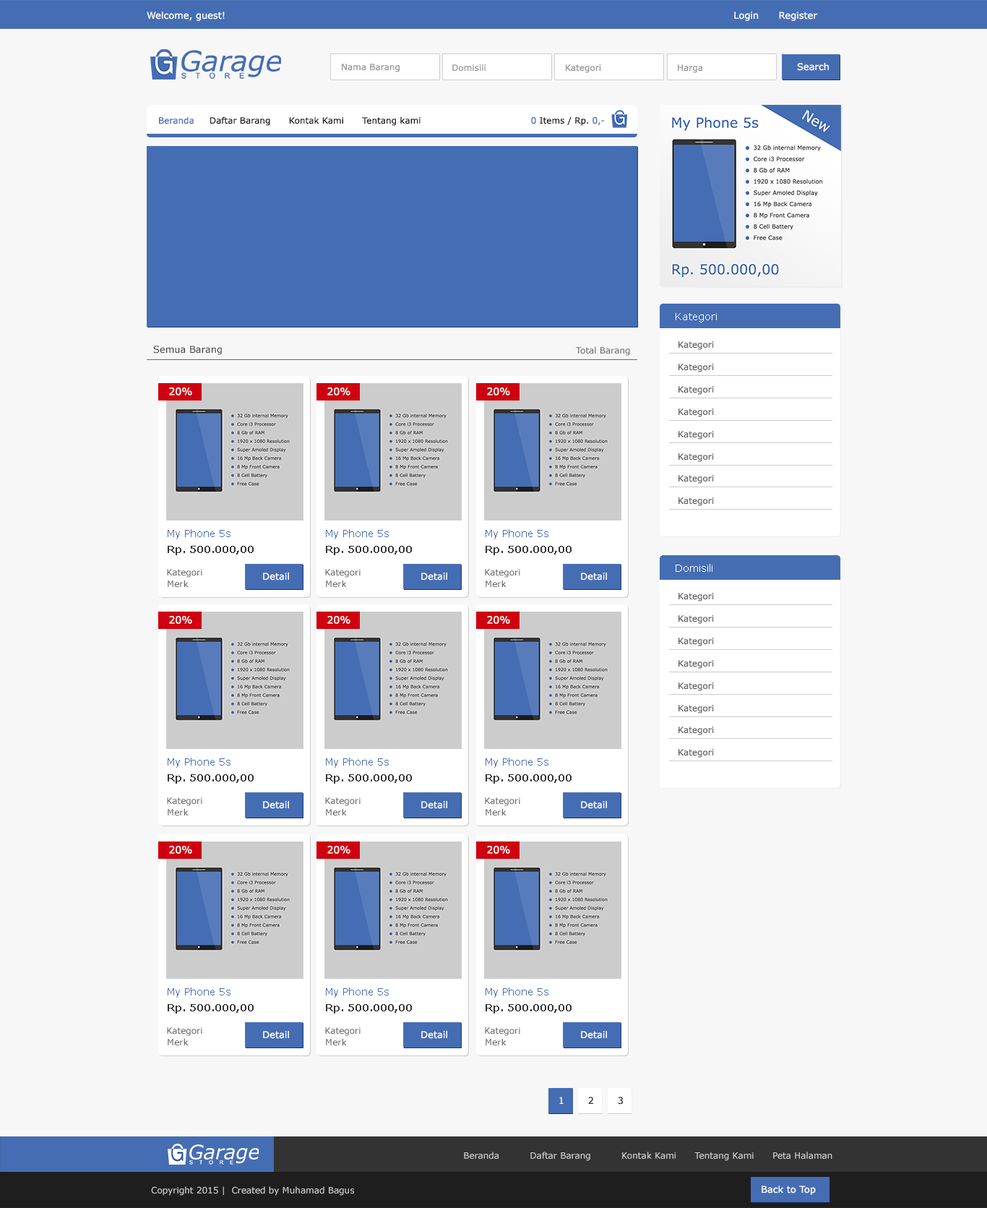
<style>
.page{position:relative;width:987px;height:1208px;background:#f7f7f7}
.page>*{position:absolute;margin:0}
.t1{font:9.4px "Verdana";color:#ffffff}
.t2{font:8.7px "Verdana";color:#999999}
.t3{font:8.7px "Verdana";color:#1e1e1e}
.t4{font:8.7px "Verdana";color:#456db3}
.t5{font:10.1px "Verdana";color:#ffffff}
.t6{font:8.7px "Verdana";color:#666666}
.t7{font:9.4px "Verdana";color:#333333}
.t8{font:10.1px "Verdana";color:#456db3}
.t9{font:10.1px "Verdana-Bold";color:#333333}
.t10{font:8.7px "Verdana";color:#cccccc}
</style>
<div class="page">
<p class="t1" style="left:147px;top:12px;width:78px;height:9px">Welcome, guest!</p>
<p class="t1" style="left:734px;top:12px;width:84px;height:9px">Login      Register</p>
<p class="t2" style="left:342px;top:64px;width:58px;height:8px">Nama Barang</p>
<p class="t2" style="left:452px;top:64px;width:34px;height:8px">Domisili</p>
<p class="t2" style="left:566px;top:64px;width:35px;height:9px">Kategori</p>
<p class="t2" style="left:678px;top:64px;width:25px;height:9px">Harga</p>
<p class="t1" style="left:797px;top:63px;width:32px;height:8px">Search</p>
<p class="t3" style="left:159px;top:116px;width:262px;height:10px"><span class="t4">Beranda    </span> Daftar Barang      Kontak Kami      Tentang kami</p>
<p class="t3" style="left:531px;top:116px;width:74px;height:10px"><span class="t4">0 </span>Items / Rp.<span class="t4"> 0,-</span></p>
<p class="t5" style="left:676px;top:313px;width:41px;height:9px">Kategori</p>
<p class="t6" style="left:679px;top:341px;width:35px;height:9px">Kategori</p>
<p class="t7" style="left:153px;top:345px;width:69px;height:10px">Semua Barang</p>
<p class="t6" style="left:576px;top:346px;width:54px;height:10px">Total Barang</p>
<p class="t6" style="left:679px;top:364px;width:35px;height:8px">Kategori</p>
<p class="t5" style="left:169px;top:387px;width:23px;height:8px">20%</p>
<p class="t5" style="left:327px;top:387px;width:24px;height:8px">20%</p>
<p class="t5" style="left:487px;top:387px;width:23px;height:8px">20%</p>
<p class="t6" style="left:679px;top:386px;width:35px;height:9px">Kategori</p>
<p class="t6" style="left:679px;top:408px;width:35px;height:9px">Kategori</p>
<p class="t6" style="left:679px;top:431px;width:35px;height:8px">Kategori</p>
<p class="t6" style="left:679px;top:453px;width:35px;height:9px">Kategori</p>
<p class="t6" style="left:679px;top:475px;width:35px;height:9px">Kategori</p>
<p class="t6" style="left:679px;top:497px;width:35px;height:9px">Kategori</p>
<p class="t8" style="left:168px;top:529px;width:63px;height:10px">My Phone 5s</p>
<p class="t8" style="left:326px;top:529px;width:63px;height:10px">My Phone 5s</p>
<p class="t8" style="left:486px;top:529px;width:63px;height:10px">My Phone 5s</p>
<p class="t9" style="left:168px;top:546px;width:86px;height:9px">Rp. 500.000,00</p>
<p class="t9" style="left:326px;top:546px;width:86px;height:9px">Rp. 500.000,00</p>
<p class="t9" style="left:486px;top:546px;width:86px;height:9px">Rp. 500.000,00</p>
<p class="t6" style="left:167px;top:569px;width:35px;height:8px">Kategori</p>
<p class="t6" style="left:325px;top:569px;width:36px;height:8px">Kategori</p>
<p class="t6" style="left:485px;top:569px;width:35px;height:8px">Kategori</p>
<p class="t5" style="left:676px;top:564px;width:37px;height:8px">Domisili</p>
<p class="t6" style="left:168px;top:580px;width:21px;height:8px">Merk</p>
<p class="t1" style="left:263px;top:572px;width:26px;height:8px">Detail</p>
<p class="t6" style="left:326px;top:580px;width:21px;height:8px">Merk</p>
<p class="t1" style="left:421px;top:572px;width:26px;height:8px">Detail</p>
<p class="t6" style="left:486px;top:580px;width:21px;height:8px">Merk</p>
<p class="t1" style="left:581px;top:572px;width:26px;height:8px">Detail</p>
<p class="t6" style="left:679px;top:593px;width:35px;height:8px">Kategori</p>
<p class="t5" style="left:169px;top:616px;width:23px;height:8px">20%</p>
<p class="t5" style="left:327px;top:616px;width:24px;height:8px">20%</p>
<p class="t5" style="left:487px;top:616px;width:23px;height:8px">20%</p>
<p class="t6" style="left:679px;top:615px;width:35px;height:9px">Kategori</p>
<p class="t6" style="left:679px;top:637px;width:35px;height:9px">Kategori</p>
<p class="t6" style="left:679px;top:660px;width:35px;height:9px">Kategori</p>
<p class="t6" style="left:679px;top:682px;width:35px;height:9px">Kategori</p>
<p class="t6" style="left:679px;top:705px;width:35px;height:8px">Kategori</p>
<p class="t6" style="left:679px;top:726px;width:35px;height:9px">Kategori</p>
<p class="t6" style="left:679px;top:749px;width:35px;height:8px">Kategori</p>
<p class="t8" style="left:168px;top:757px;width:63px;height:11px">My Phone 5s</p>
<p class="t8" style="left:326px;top:757px;width:63px;height:11px">My Phone 5s</p>
<p class="t8" style="left:486px;top:757px;width:63px;height:11px">My Phone 5s</p>
<p class="t9" style="left:168px;top:774px;width:86px;height:9px">Rp. 500.000,00</p>
<p class="t9" style="left:326px;top:774px;width:86px;height:9px">Rp. 500.000,00</p>
<p class="t9" style="left:486px;top:774px;width:86px;height:9px">Rp. 500.000,00</p>
<p class="t6" style="left:167px;top:797px;width:35px;height:9px">Kategori</p>
<p class="t6" style="left:325px;top:797px;width:36px;height:9px">Kategori</p>
<p class="t6" style="left:485px;top:797px;width:35px;height:9px">Kategori</p>
<p class="t6" style="left:168px;top:808px;width:21px;height:8px">Merk</p>
<p class="t1" style="left:263px;top:801px;width:26px;height:8px">Detail</p>
<p class="t6" style="left:326px;top:808px;width:21px;height:8px">Merk</p>
<p class="t1" style="left:421px;top:801px;width:26px;height:8px">Detail</p>
<p class="t6" style="left:486px;top:808px;width:21px;height:8px">Merk</p>
<p class="t1" style="left:581px;top:801px;width:26px;height:8px">Detail</p>
<p class="t5" style="left:169px;top:846px;width:23px;height:8px">20%</p>
<p class="t5" style="left:327px;top:846px;width:24px;height:8px">20%</p>
<p class="t5" style="left:487px;top:846px;width:23px;height:8px">20%</p>
<p class="t8" style="left:168px;top:987px;width:63px;height:10px">My Phone 5s</p>
<p class="t8" style="left:326px;top:987px;width:63px;height:10px">My Phone 5s</p>
<p class="t8" style="left:486px;top:987px;width:63px;height:10px">My Phone 5s</p>
<p class="t9" style="left:168px;top:1004px;width:86px;height:9px">Rp. 500.000,00</p>
<p class="t9" style="left:326px;top:1004px;width:86px;height:9px">Rp. 500.000,00</p>
<p class="t9" style="left:486px;top:1004px;width:86px;height:9px">Rp. 500.000,00</p>
<p class="t6" style="left:167px;top:1027px;width:35px;height:9px">Kategori</p>
<p class="t6" style="left:168px;top:1038px;width:21px;height:8px">Merk</p>
<p class="t1" style="left:263px;top:1031px;width:26px;height:8px">Detail</p>
<p class="t6" style="left:325px;top:1027px;width:36px;height:9px">Kategori</p>
<p class="t6" style="left:326px;top:1038px;width:21px;height:8px">Merk</p>
<p class="t1" style="left:421px;top:1031px;width:26px;height:8px">Detail</p>
<p class="t6" style="left:485px;top:1027px;width:35px;height:9px">Kategori</p>
<p class="t6" style="left:486px;top:1038px;width:21px;height:8px">Merk</p>
<p class="t1" style="left:581px;top:1031px;width:26px;height:8px">Detail</p>
<p class="t1" style="left:559px;top:1096px;width:5px;height:8px">1</p>
<p class="t7" style="left:588px;top:1096px;width:6px;height:8px">2</p>
<p class="t7" style="left:618px;top:1096px;width:6px;height:8px">3</p>
<p class="t10" style="left:464px;top:1151px;width:369px;height:10px">Beranda          Daftar Barang          Kontak Kami      Tentang Kami      Peta Halaman</p>
<p class="t10" style="left:151px;top:1186px;width:203px;height:9px">Copyright 2015 |  Created by Muhamad Bagus</p>
<p class="t1" style="left:762px;top:1185px;width:54px;height:10px">Back to Top</p>
</div>
